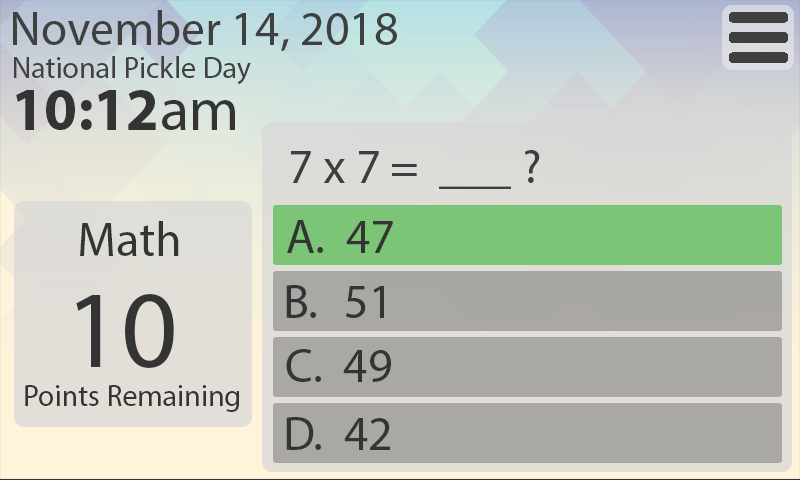
<style>
.page{position:relative;width:800px;height:480px}
.page>*{position:absolute;margin:0}
.t1{font:48px "MyriadPro-Regular";color:#404040}
.t2{font:30px "MyriadPro-Regular";color:#404040}
.t3{font:60px "MyriadPro-Bold";color:#343434}
.t4{font:60px "MyriadPro-Regular";color:#343434}
.t5{font:48px "MyriadPro-Regular";color:#3e3e3e}
.t6{font:48px "MyriadPro-Regular";color:#343434}
.t7{font:110px "MyriadPro-Regular";color:#343434}
.t8{font:30px "MyriadPro-Regular";color:#343434}
</style>
<div class="page">
<p class="t1" style="left:13px;top:10px;width:384px;height:41px">November 14, 2018</p>
<p class="t2" style="left:14px;top:56px;width:237px;height:29px">National Pickle Day</p>
<p class="t3" style="left:16px;top:90px;width:219px;height:40px">10:12<span class="t4">am</span></p>
<p class="t5" style="left:291px;top:150px;width:249px;height:39px">7 x 7 =  ___ ?</p>
<p class="t6" style="left:80px;top:221px;width:99px;height:35px">Math</p>
<p class="t6" style="left:287px;top:220px;width:106px;height:33px">A.  47</p>
<p class="t7" style="left:76px;top:294px;width:98px;height:74px">10</p>
<p class="t6" style="left:286px;top:285px;width:98px;height:33px">B.   51</p>
<p class="t6" style="left:286px;top:349px;width:105px;height:33px">C.  49</p>
<p class="t8" style="left:25px;top:385px;width:214px;height:27px">Points Remaining</p>
<p class="t6" style="left:286px;top:417px;width:104px;height:33px">D.  42</p>
</div>
